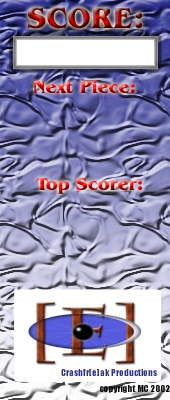
<style>
.page{position:relative;width:170px;height:400px}
.page>*{position:absolute;margin:0}
.t1{font:30px "BenguiatITCbyBT-Bold"}
.t2{font:18px "BenguiatITCbyBT-Bold"}
.t3{font:9px "Impact";color:#2e3192}
.t4{font:9px "Impact";color:#000000}
</style>
<div class="page">
<p class="t1" style="left:27px;top:7px;width:116px;height:22px">SCORE:</p>
<p class="t2" style="left:33px;top:80px;width:102px;height:13px">Next Piece:</p>
<p class="t2" style="left:36px;top:177px;width:106px;height:17px">Top Scorer:</p>
<p class="t3" style="left:61px;top:369px;width:96px;height:7px">Crashfr[e]ak Productions</p>
<p class="t4" style="left:100px;top:385px;width:70px;height:8px">copyright MC 2002</p>
</div>
